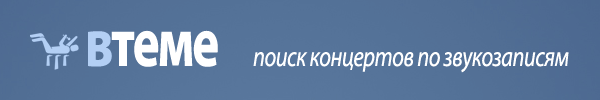
<style>
.page{position:relative;width:600px;height:100px}
.page>*{position:absolute;margin:0}
.t1{font:70px "MyriadPro-Bold";letter-spacing:-0.04em;color:#ffffff;scale:0.73 1}
.t2{font:70px "MyriadPro-Bold";letter-spacing:-0.04em;color:#b3cff4;scale:0.73 1}
.t3{font:28px "MyriadPro-It";letter-spacing:-0.02em;color:#ffffff;scale:0.8 1}
</style>
<div class="page">
<p class="t1" style="left:88px;top:30px;width:130px;height:37px"><span class="t2">в</span>теме</p>
<p class="t3" style="left:253px;top:52px;width:316px;height:21px">поиск концертов по звукозаписям</p>
</div>
